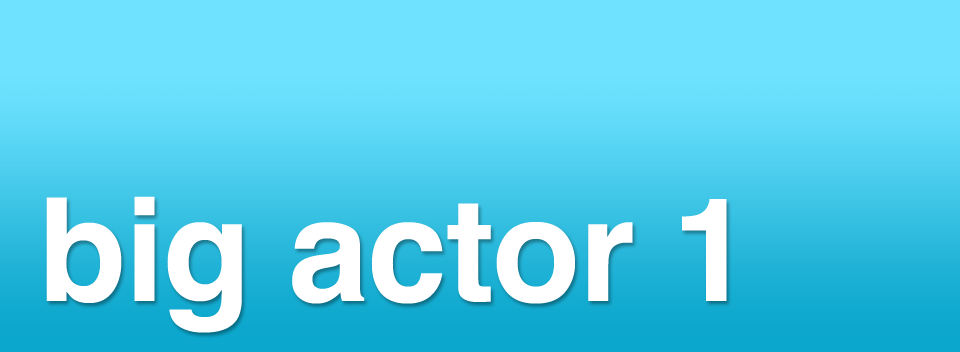
<style>
.page{position:relative;width:960px;height:352px;background:#6ee2ff}
.page>*{position:absolute;margin:0}
.t1{font:144px "Helvetica-Bold";letter-spacing:-0.01em;color:#ffffff}
</style>
<div class="page">
<p class="t1" style="left:46px;top:196px;width:681px;height:137px">big actor 1</p>
</div>
